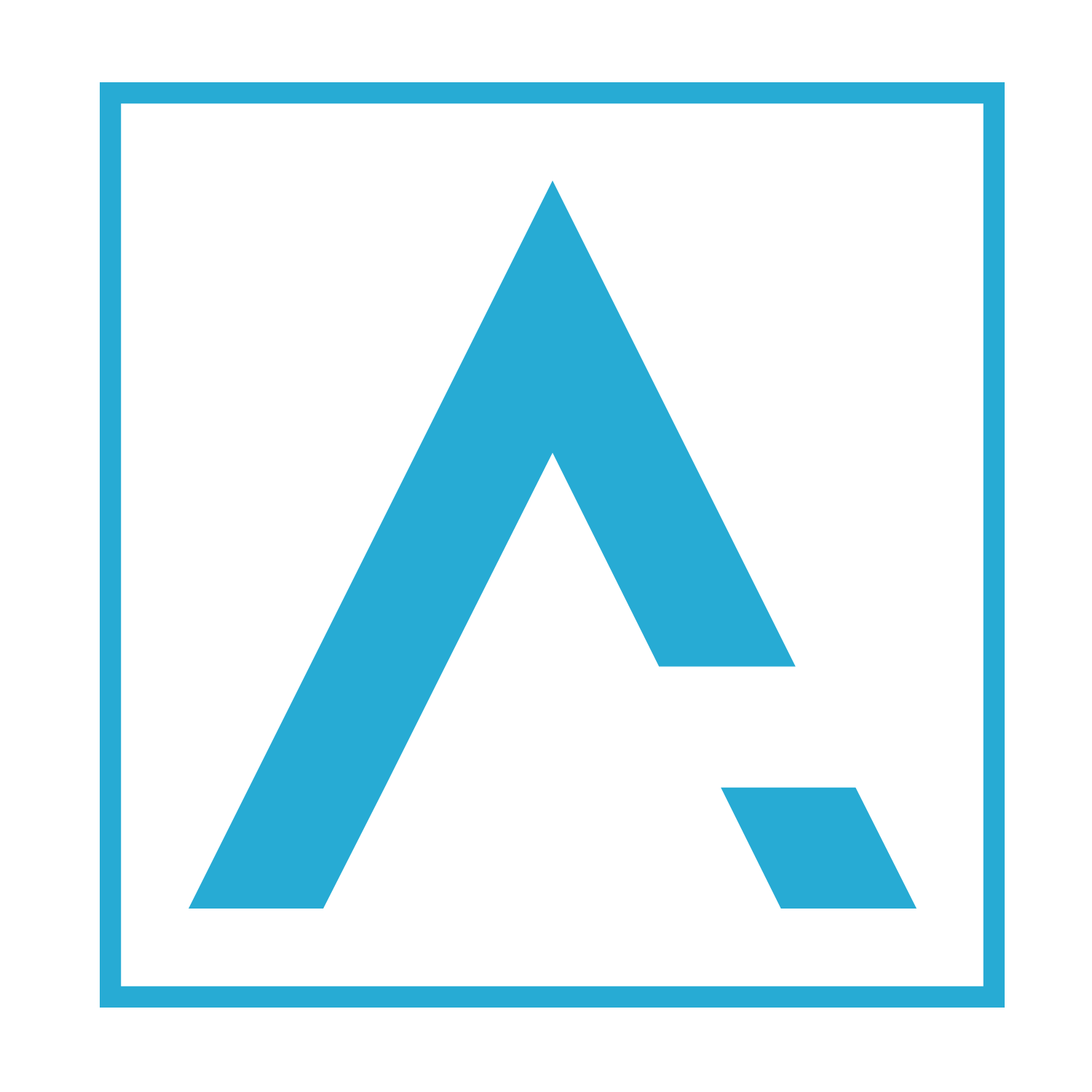
<style>
.page{position:relative;width:1092px;height:1092px;background:#ffffff}
.page>*{position:absolute;margin:0}
.t1{font:910px "Anurati-Regular";letter-spacing:0.1em;color:#27abd4}
</style>
<div class="page">
<p class="t1" style="left:189px;top:181px;width:728px;height:728px">A</p>
</div>
